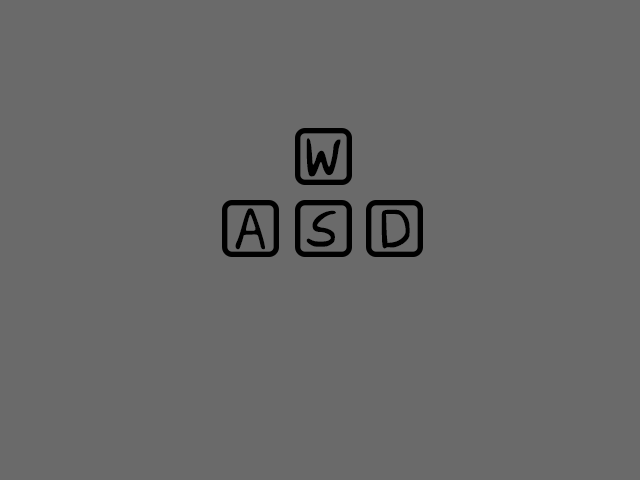
<style>
.page{position:relative;width:640px;height:480px;background:#6a6a6a}
.page>*{position:absolute;margin:0}
.t1{font:64px "XiaScript152204";color:#000000}
.t2{font:58.7px "XiaScript152204";color:#000000}
</style>
<div class="page">
<p class="t1" style="left:306px;top:138px;width:35px;height:39px">W</p>
<p class="t2" style="left:235px;top:208px;width:30px;height:42px">A</p>
<p class="t1" style="left:381px;top:209px;width:29px;height:40px">D</p>
<p class="t1" style="left:306px;top:210px;width:30px;height:37px">S</p>
</div>
